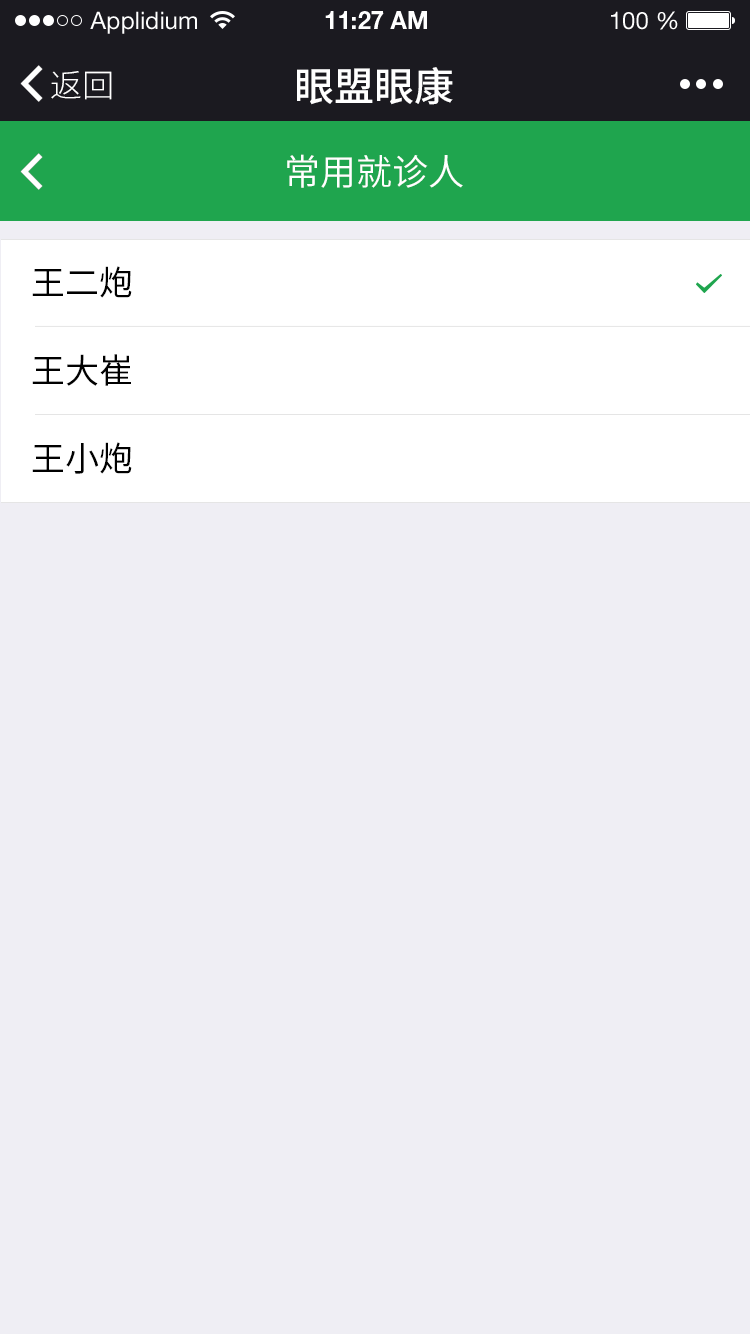
<style>
.page{position:relative;width:750px;height:1334px;background:#efeef4}
.page>*{position:absolute;margin:0}
.t1{font:24px "HelveticaNeueLTStd-Roman";color:#ffffff}
.t2{font:24px "HelveticaNeueLTStd-Bd";color:#ffffff}
.t3{font:32px "SourceHanSansCN-Light";color:#ffffff}
.t4{font:40px "SourceHanSansCN-Medium";color:#ffffff}
.t5{font:36px "SourceHanSansCN-Normal";color:#ffffff}
.t6{font:34.1px "SourceHanSansCN-Regular";color:#000000}
</style>
<div class="page">
<p class="t1" style="left:90px;top:11px;width:107px;height:23px">Applidium</p>
<p class="t2" style="left:325px;top:11px;width:102px;height:18px">11:27 AM</p>
<p class="t1" style="left:611px;top:11px;width:67px;height:19px">100 %</p>
<p class="t3" style="left:51px;top:71px;width:61px;height:29px">返回</p>
<p class="t4" style="left:297px;top:67px;width:156px;height:38px">眼盟眼康</p>
<p class="t5" style="left:287px;top:154px;width:176px;height:34px">常用就诊人</p>
<p class="t6" style="left:32px;top:266px;width:100px;height:32px">王二炮</p>
<p class="t6" style="left:32px;top:354px;width:99px;height:32px">王大崔</p>
<p class="t6" style="left:32px;top:442px;width:100px;height:32px">王小炮</p>
</div>
